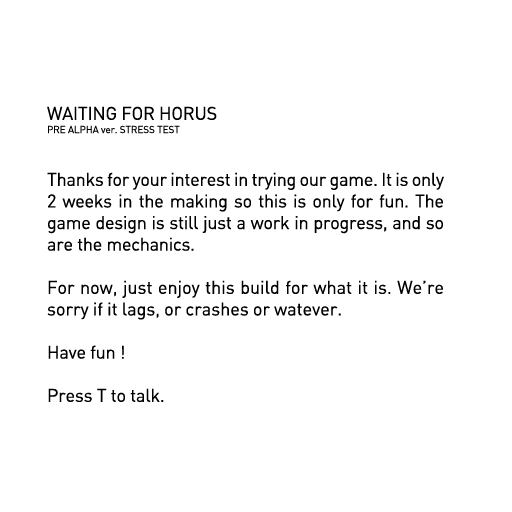
<style>
.page{position:relative;width:512px;height:512px;background:#ffffff}
.page>*{position:absolute;margin:0}
.t1{font:18px "DIN";letter-spacing:-0.01em;color:#000000}
.t2{font:10px "DIN";letter-spacing:-0.01em;color:#000000}
</style>
<div class="page">
<p class="t1" style="left:47px;top:106px;width:170px;height:14px">WAITING FOR HORUS</p>
<p class="t2" style="left:48px;top:125px;width:132px;height:9px">PRE ALPHA ver. STRESS TEST</p>
<p class="t1" style="left:47px;top:172px;width:397px;height:230px;text-align:justify">Thanks for your interest in trying our game. It is only 2 weeks in the making so this is only for fun. The game design is still just a work in progress, and so are the mechanics.<br><br>For now, just enjoy this build for what it is. We’re sorry if it lags, or crashes or watever.<br><br>Have fun !<br><br>Press T to talk.</p>
</div>
